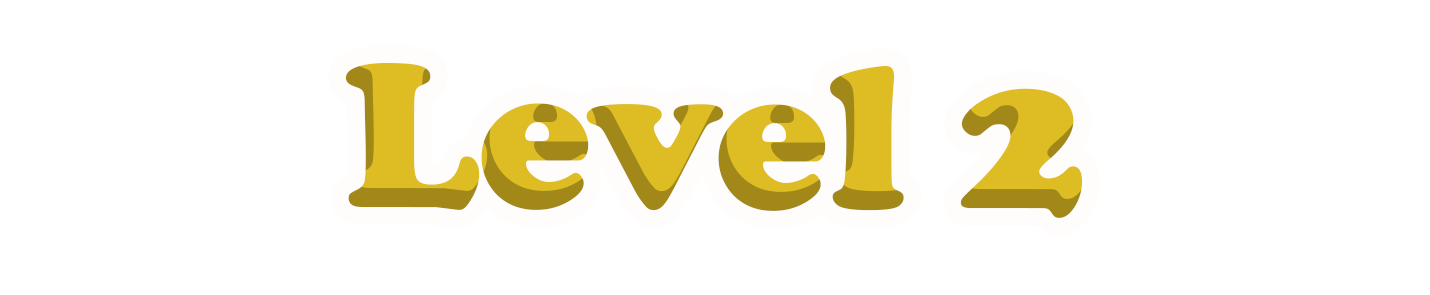
<style>
.page{position:relative;width:1430px;height:295px;background:#ffffff}
.page>*{position:absolute;margin:0}
.t1{font:213px "CooperBlack";color:#debd24}
</style>
<div class="page">
<p class="t1" style="left:345px;top:62px;width:738px;height:156px">Level 2</p>
</div>
